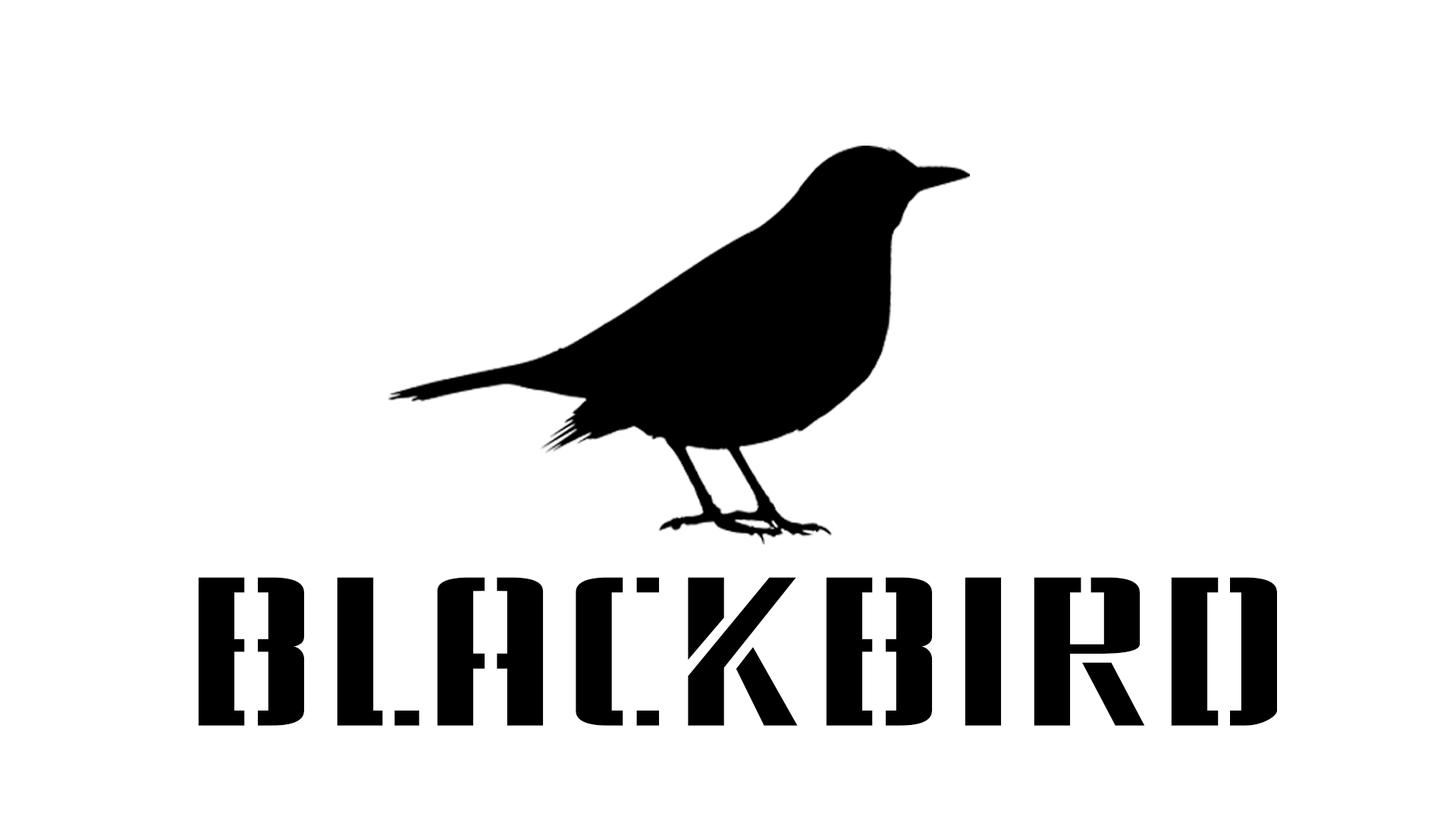
<style>
.page{position:relative;width:1456px;height:819px;background:#ffffff}
.page>*{position:absolute;margin:0}
.t1{font:189.6px "BraesideLumberboy-Regular";color:#000000}
</style>
<div class="page">
<p class="t1" style="left:198px;top:577px;width:1079px;height:149px">BLACKBIRD</p>
</div>
